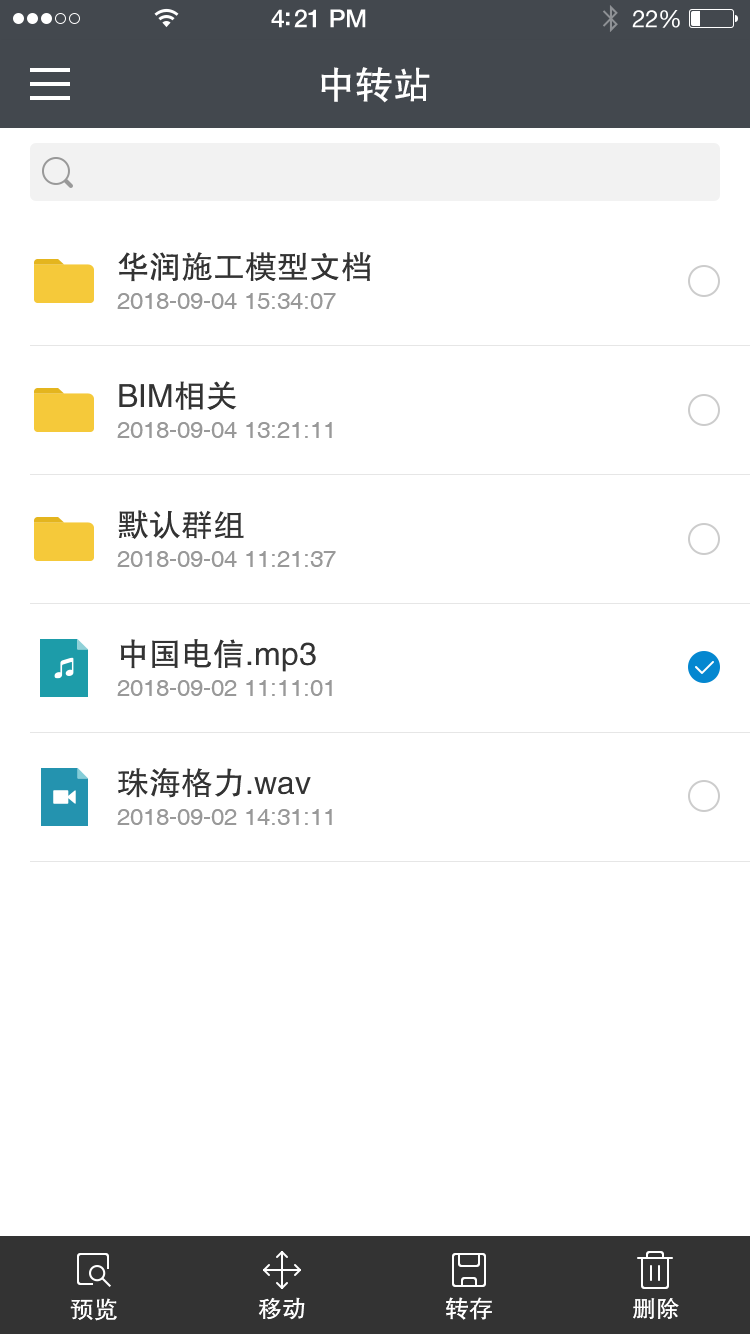
<style>
.page{position:relative;width:750px;height:1334px;background:#ffffff}
.page>*{position:absolute;margin:0}
.t1{font:38px "FZHTJW--GB1-0";color:#ffffff}
.t2{font:32px "FZHTJW--GB1-0";color:#333333}
.t3{font:24px "Helvetica";color:#999999}
.t4{font:24px "FZHTJW--GB1-0";color:#ffffff}
</style>
<div class="page">
<p class="t1" style="left:321px;top:67px;width:109px;height:36px">中转站</p>
<p class="t2" style="left:118px;top:252px;width:253px;height:30px">华润施工模型文档</p>
<p class="t3" style="left:117px;top:293px;width:219px;height:16px">2018-09-04 15:34:07</p>
<p class="t2" style="left:119px;top:381px;width:118px;height:29px">BIM相关</p>
<p class="t3" style="left:117px;top:422px;width:215px;height:16px">2018-09-04 13:21:11</p>
<p class="t2" style="left:118px;top:510px;width:126px;height:29px">默认群组</p>
<p class="t3" style="left:117px;top:551px;width:219px;height:16px">2018-09-04 11:21:37</p>
<p class="t2" style="left:120px;top:639px;width:196px;height:33px">中国电信.mp3</p>
<p class="t3" style="left:117px;top:680px;width:215px;height:16px">2018-09-02 11:11:01</p>
<p class="t2" style="left:118px;top:768px;width:193px;height:30px">珠海格力.wav</p>
<p class="t3" style="left:117px;top:809px;width:215px;height:16px">2018-09-02 14:31:11</p>
<p class="t4" style="left:70px;top:1298px;width:47px;height:23px">预览</p>
<p class="t4" style="left:258px;top:1297px;width:47px;height:23px">移动</p>
<p class="t4" style="left:446px;top:1297px;width:46px;height:23px">转存</p>
<p class="t4" style="left:633px;top:1298px;width:46px;height:21px">删除</p>
</div>
